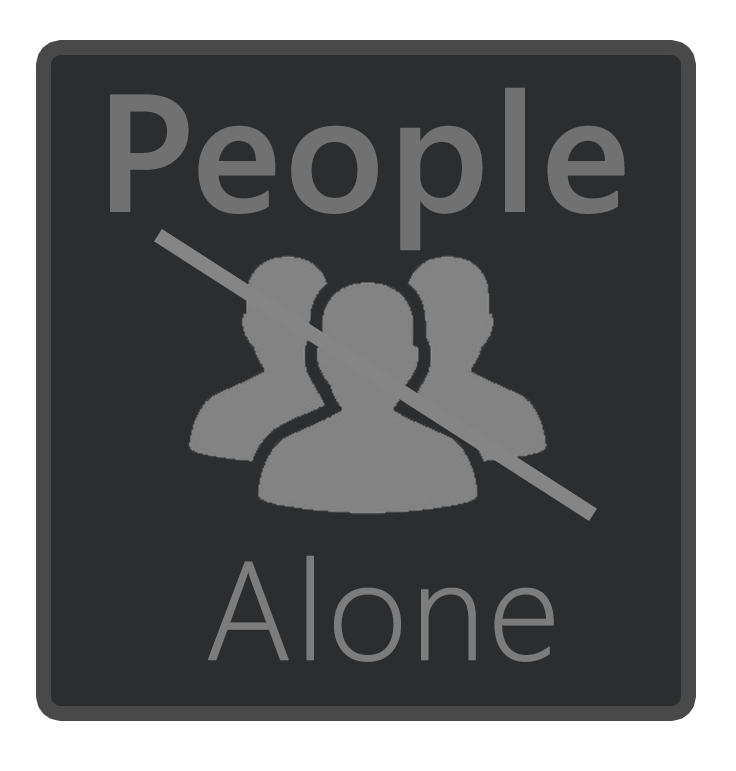
<style>
.page{position:relative;width:736px;height:771px;background:#2c2d2e}
.page>*{position:absolute;margin:0}
.t1{font:166.2px "SegoeUI-Semibold";color:#717171;font-weight:bold}
.t2{font:139.5px "SegoeUI-Light";color:#7c7c7c;font-weight:bold}
</style>
<div class="page">
<p class="t1" style="left:110px;top:87px;width:515px;height:164px">People</p>
<p class="t2" style="left:208px;top:555px;width:346px;height:107px">Alone</p>
</div>
